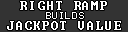
<style>
.page{position:relative;width:128px;height:32px;background:#333333}
.page>*{position:absolute;margin:0}
.t1{font:12px "Terminal";letter-spacing:0.075em;color:#ffffff}
.t2{font:8px "Terminal";letter-spacing:0.075em;color:#ffffff}
</style>
<div class="page">
<p class="t1" style="left:20px;top:1px;width:87px;height:9px">RIGHT RAMP</p>
<p class="t2" style="left:46px;top:12px;width:38px;height:7px">BUILDS</p>
<p class="t1" style="left:7px;top:21px;width:114px;height:9px">JACKPOT VALUE</p>
</div>
